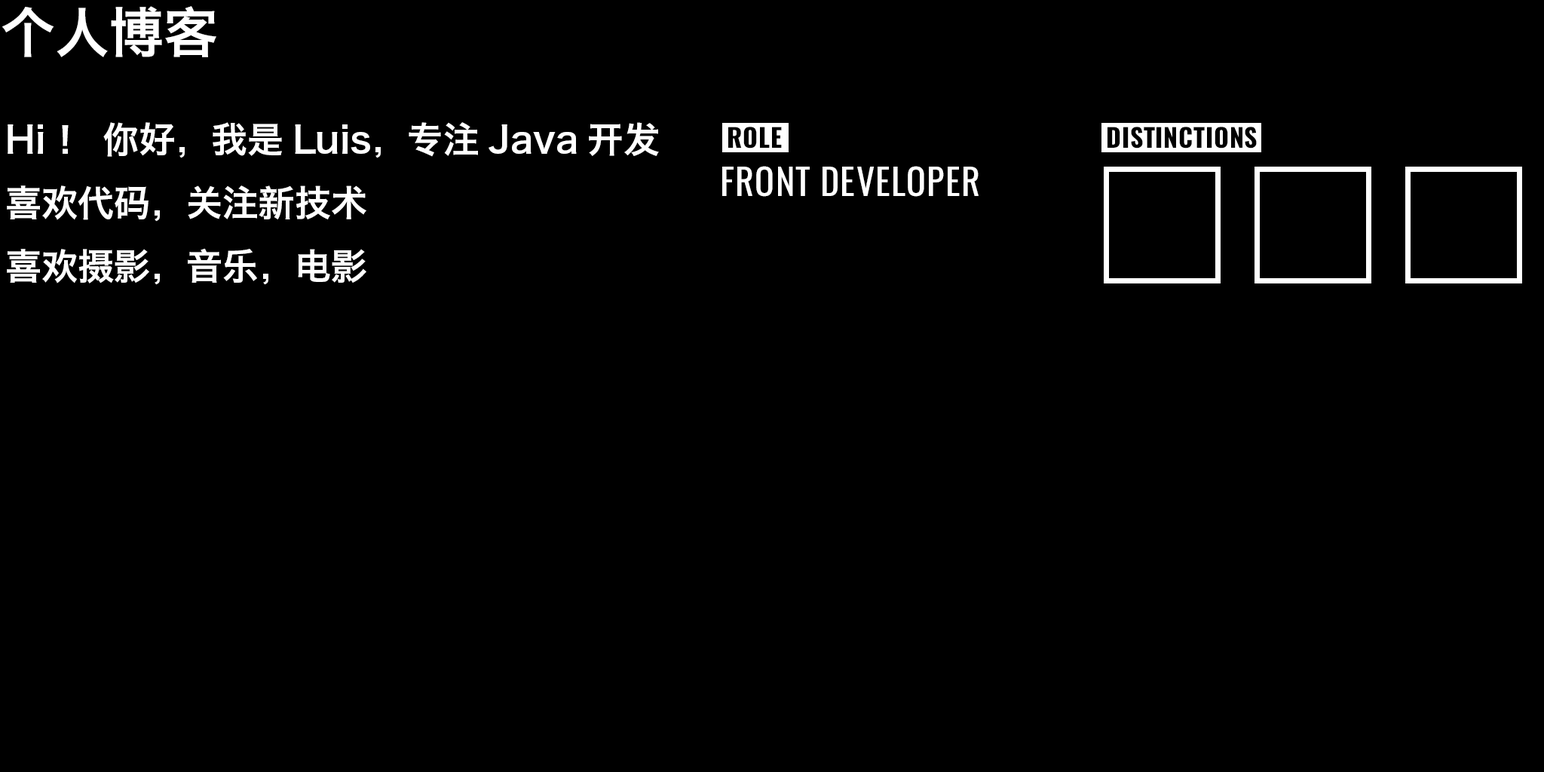
<style>
.page{position:relative;width:1544px;height:772px;background:#000000}
.page>*{position:absolute;margin:0}
.t1{font:54.3px "HiraginoSansGB-W6";color:#ffffff}
.t2{font:36.2px "HiraginoSansGB-W6";color:#ffffff}
</style>
<div class="page">
<p class="t1" style="left:2px;top:6px;width:214px;height:51px">个人博客</p>
<p class="t2" style="left:7px;top:122px;width:652px;height:163px">Hi！ 你好，我是Luis，专注Java开发<br>喜欢代码，关注新技术<br>喜欢摄影，音乐，电影</p>
</div>
